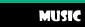
<style>
.page{position:relative;width:85px;height:27px;background:#000000}
.page>*{position:absolute;margin:0}
.t1{font:14px "ShowcardGothic-Reg";color:#ffffff}
</style>
<div class="page">
<p class="t1" style="left:39px;top:10px;width:42px;height:12px">Music</p>
</div>
